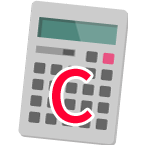
<style>
.page{position:relative;width:146px;height:146px;background:#ffffff}
.page>*{position:absolute;margin:0}
.t1{font:72px "Corporate-Logo-Medium-ver3";color:#ff0033}
</style>
<div class="page">
<p class="t1" style="left:52px;top:68px;width:40px;height:56px">C</p>
</div>
